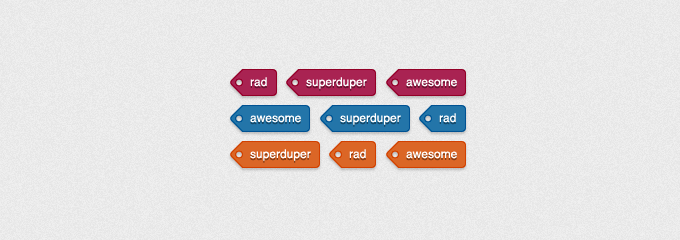
<style>
.page{position:relative;width:680px;height:240px}
.page>*{position:absolute;margin:0}
.t1{font:12px "Helvetica";color:#ffffff}
</style>
<div class="page">
<p class="t1" style="left:250px;top:77px;width:17px;height:10px">rad</p>
<p class="t1" style="left:306px;top:77px;width:61px;height:12px">superduper</p>
<p class="t1" style="left:406px;top:79px;width:51px;height:8px">awesome</p>
<p class="t1" style="left:340px;top:113px;width:61px;height:12px">superduper</p>
<p class="t1" style="left:439px;top:113px;width:17px;height:10px">rad</p>
<p class="t1" style="left:250px;top:115px;width:51px;height:8px">awesome</p>
<p class="t1" style="left:250px;top:149px;width:61px;height:12px">superduper</p>
<p class="t1" style="left:349px;top:149px;width:17px;height:10px">rad</p>
<p class="t1" style="left:406px;top:151px;width:51px;height:8px">awesome</p>
</div>
